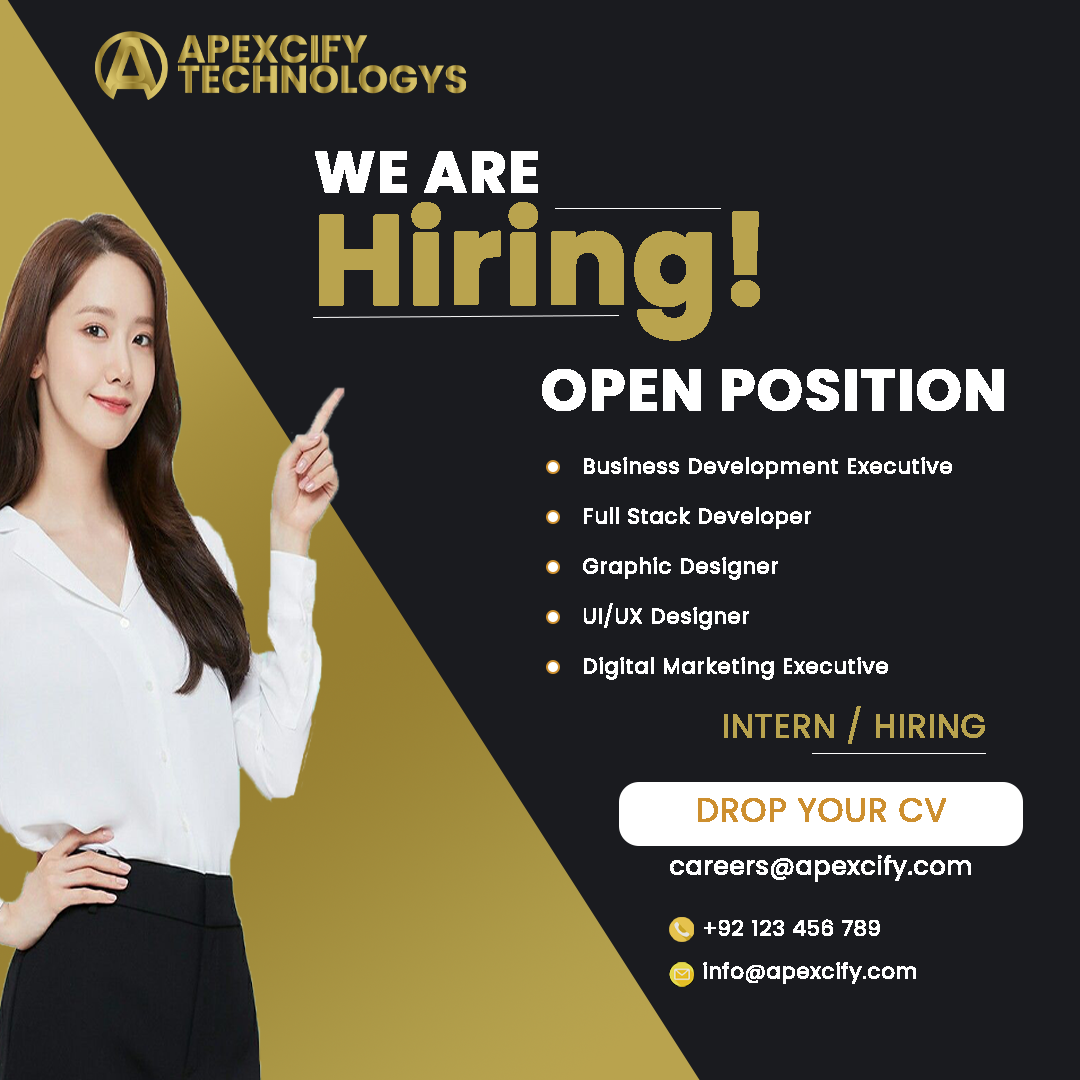
<style>
.page{position:relative;width:1080px;height:1080px;background:#1a1b1f}
.page>*{position:absolute;margin:0}
.t1{font:58.3px "Poppins-Bold";color:#ffffff;text-transform:uppercase;font-weight:bold}
.t2{font:125px "Poppins-Bold";color:#b9a34e;font-weight:bold}
.t3{font:20.8px/50px "Poppins-Regular";color:#ffffff;font-weight:bold}
.t4{font:33.3px "Poppins-Regular";color:#b9a34e;text-transform:uppercase;font-weight:bold}
.t5{font:33.3px "Poppins-Regular";color:#cd8f2f;text-transform:uppercase;font-weight:bold}
.t6{font:25px "Poppins-Regular";color:#ffffff;font-weight:bold}
.t7{font:20.8px "Poppins-Regular";color:#ffffff;font-weight:bold}
</style>
<div class="page">
<p class="t1" style="left:315px;top:151px;width:223px;height:42px">we are</p>
<p class="t2" style="left:319px;top:202px;width:441px;height:139px">Hiring!</p>
<p class="t1" style="left:542px;top:369px;width:462px;height:42px">open position</p>
<p class="t3" style="left:583px;top:457px;width:369px;height:223px">Business Development Executive<br>Full Stack Developer<br>Graphic Designer<br>UI/UX Designer<br>Digital Marketing Executive</p>
<p class="t4" style="left:724px;top:706px;width:261px;height:38px">intern / hiring</p>
<p class="t5" style="left:698px;top:798px;width:248px;height:24px">drop your cv</p>
<p class="t6" style="left:670px;top:855px;width:301px;height:27px">careers@apexcify.com</p>
<p class="t7" style="left:704px;top:919px;width:176px;height:17px">+92 123 456 789</p>
<p class="t7" style="left:703px;top:962px;width:213px;height:22px">info@apexcify.com</p>
</div>
